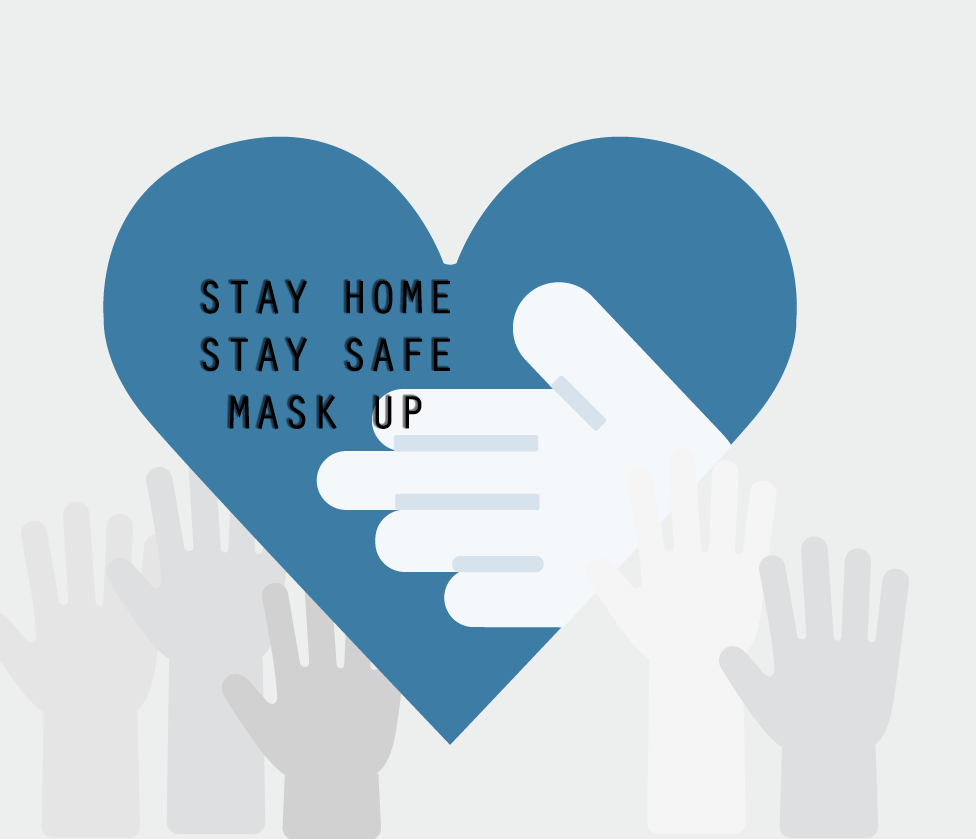
<style>
.page{position:relative;width:976px;height:839px;background:#edeeee}
.page>*{position:absolute;margin:0}
.t1{font:48px "OratorStd";color:#000000}
</style>
<div class="page">
<p class="t1" style="left:202px;top:280px;width:248px;height:150px;text-align:center">STAY HOME<br>STAY SAFE<br>MASK UP</p>
</div>
